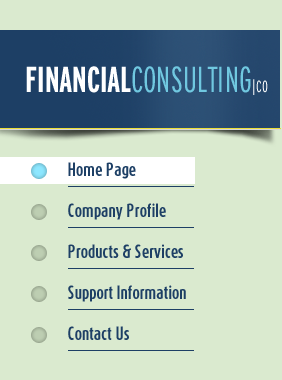
<style>
.page{position:relative;width:282px;height:380px;background:#daeacf}
.page>*{position:absolute;margin:0}
.t1{font:36px "Interstate-LightCompressed";color:#70c8e0}
.t2{font:36px "Interstate-BoldCompressed";color:#ffffff}
.t3{font:16px "Interstate-LightCompressed";color:#ffffff}
.t4{font:16px "DaxCompact-Bold";color:#1d3f65}
</style>
<div class="page">
<p class="t1" style="left:26px;top:66px;width:242px;height:29px"><span class="t2">FINANCIAL</span>CONSULTING<span class="t3">|CO</span></p>
<p class="t4" style="left:68px;top:162px;width:68px;height:17px">Home Page</p>
<p class="t4" style="left:68px;top:203px;width:98px;height:17px">Company Profile</p>
<p class="t4" style="left:68px;top:244px;width:115px;height:14px">Products &amp; Services</p>
<p class="t4" style="left:68px;top:285px;width:118px;height:17px">Support Information</p>
<p class="t4" style="left:68px;top:326px;width:61px;height:14px">Contact Us</p>
</div>
